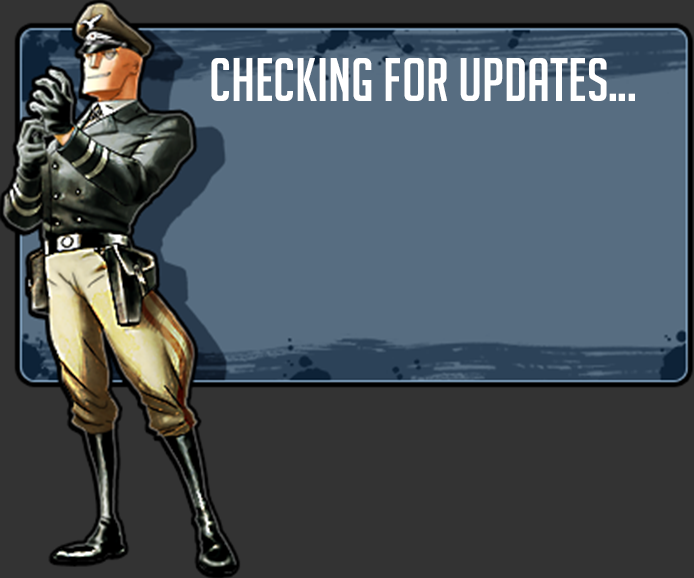
<style>
.page{position:relative;width:694px;height:578px;background:#333333}
.page>*{position:absolute;margin:0}
.t1{font:60px "BigNoodleTitling";color:#ffffff}
</style>
<div class="page">
<p class="t1" style="left:211px;top:58px;width:424px;height:43px">checking for updates...</p>
</div>
